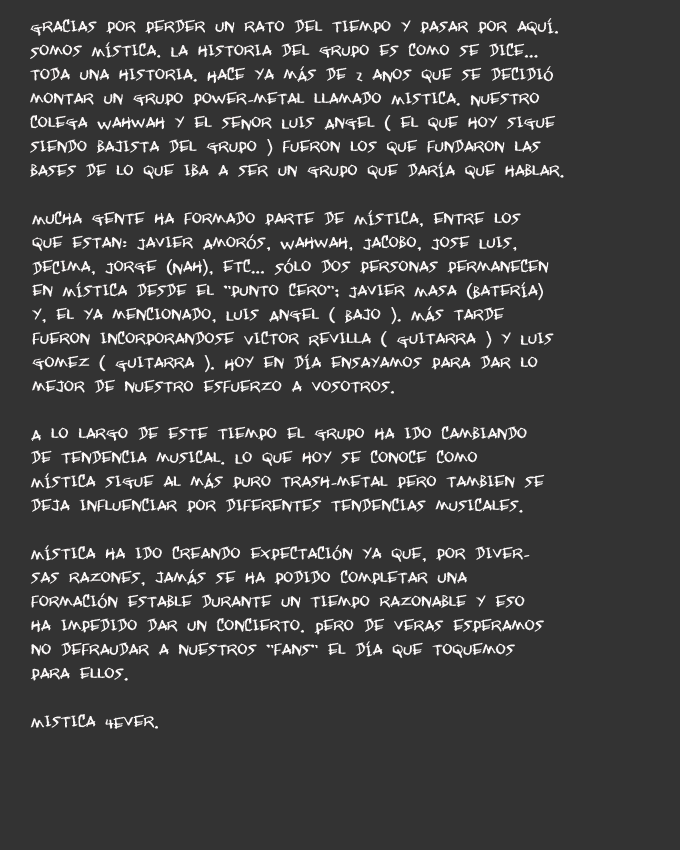
<style>
.page{position:relative;width:680px;height:850px;background:#333333}
.page>*{position:absolute;margin:0}
.t1{font:20px "Janglywalk";color:#fcf9f9}
</style>
<div class="page">
<p class="t1" style="left:30px;top:18px;width:534px;height:161px">Gracias por perder un rato del tiempo y pasar por aquí. <br>Somos Mística. La historia del grupo es como se dice... toda una historia. Hace ya más de 2 años que se decidió montar un grupo power-metal llamado Mistica. Nuestro colega Wahwah y el señor Luis Angel ( el que hoy sigue siendo bajista del grupo ) fueron los que fundaron las bases de lo que iba a ser un grupo que daría que hablar.</p>
<p class="t1" style="left:32px;top:210px;width:522px;height:184px">Mucha gente ha formado parte de Mística, entre los que estan: Javier Amorós, Wahwah, Jacobo, Jose Luis, DeCima, Jorge (Nah), etc... Sólo dos personas permanecen en Mística desde el "punto cero"; Javier Masa (Batería) y, el ya mencionado, Luis Angel ( Bajo ). Más tarde fueron incorporandose Victor Revilla ( Guitarra ) y Luis gomez ( Guitarra ). Hoy en día ensayamos para dar lo mejor de nuestro esfuerzo a vosotros.</p>
<p class="t1" style="left:30px;top:426px;width:515px;height:303px">A lo largo de este tiempo el grupo ha ido cambiando de tendencia musical. Lo que hoy se conoce como Mística sigue al más puro trash-metal pero tambien se deja influenciar por diferentes tendencias musicales. <br><br>Mística ha ido creando expectación ya que, por diversas razones, jamás se ha podido completar una formación estable durante un tiempo razonable y eso ha impedido dar un concierto. Pero de veras esperamos no defraudar a nuestros "fans" el día que toquemos para ellos. <br><br>Mistica 4Ever.</p>
</div>
